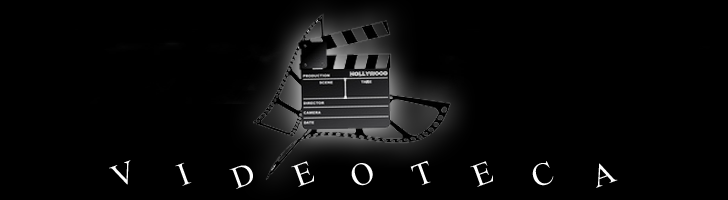
<style>
.page{position:relative;width:728px;height:200px;background:#000000}
.page>*{position:absolute;margin:0}
.t1{font:48px "MicrosoftHimalaya";color:#fefefe}
.t2{font:46.1px "MicrosoftHimalaya";color:#fefefe}
</style>
<div class="page">
<p class="t1" style="left:109px;top:160px;width:22px;height:25px;rotate:-20deg">V</p>
<p class="t1" style="left:291px;top:161px;width:23px;height:26px;rotate:-20deg">E</p>
<p class="t1" style="left:410px;top:160px;width:21px;height:26px;rotate:-20deg">T</p>
<p class="t1" style="left:470px;top:161px;width:23px;height:26px;rotate:-20deg">E</p>
<p class="t1" style="left:532px;top:161px;width:22px;height:25px;rotate:-20deg">C</p>
<p class="t1" style="left:175px;top:162px;width:17px;height:24px;rotate:-20deg">I</p>
<p class="t2" style="left:229px;top:165px;width:24px;height:24px;rotate:-20deg">D</p>
<p class="t1" style="left:351px;top:163px;width:22px;height:23px;rotate:-20deg">O</p>
<p class="t1" style="left:596px;top:163px;width:22px;height:25px;rotate:-20deg">A</p>
</div>
